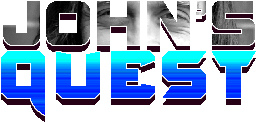
<style>
.page{position:relative;width:256px;height:122px;background:#ffffff}
.page>*{position:absolute;margin:0}
.t1{font:66.5px "BolsterBold";letter-spacing:0.025em;color:#ffffff}
.t2{font:64.4px "BravoDestroyerPersonalUSE-regular";letter-spacing:0.025em;color:#ffffff}
</style>
<div class="page">
<p class="t1" style="left:3px;top:1px;width:252px;height:44px">JOHN’S</p>
<p class="t2" style="left:1px;top:51px;width:255px;height:64px">Quest</p>
</div>
